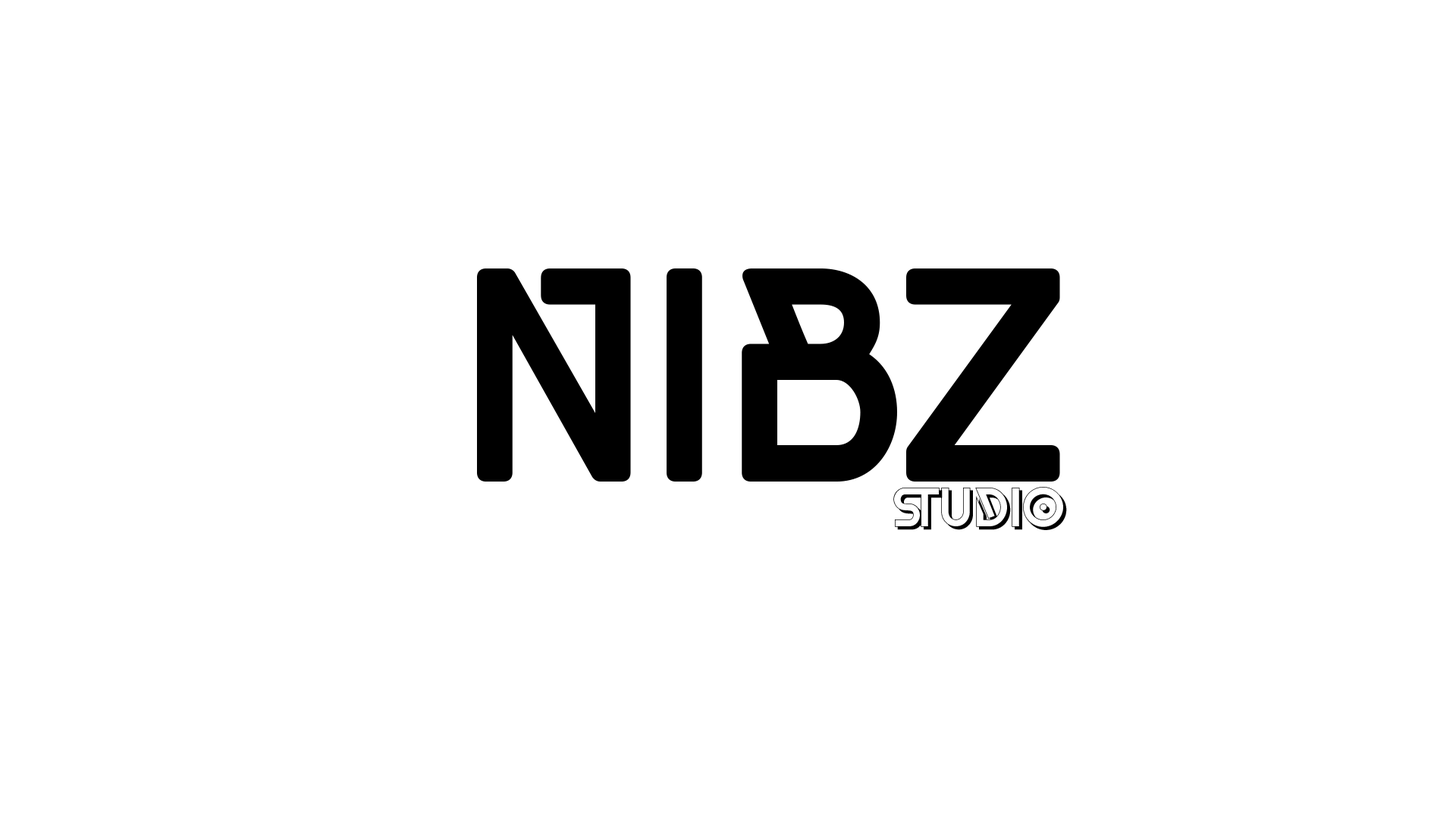
<style>
.page{position:relative;width:1456px;height:819px;background:#ffffff}
.page>*{position:absolute;margin:0}
.t1{font:303.3px "RobloxBlackRound";color:#000000}
.t2{font:54.6px "RobloxBlackShadow";color:#000000}
</style>
<div class="page">
<p class="t1" style="left:477px;top:268px;width:583px;height:214px">nIbZ</p>
<p class="t2" style="left:893px;top:487px;width:174px;height:43px">STUDIO</p>
</div>
